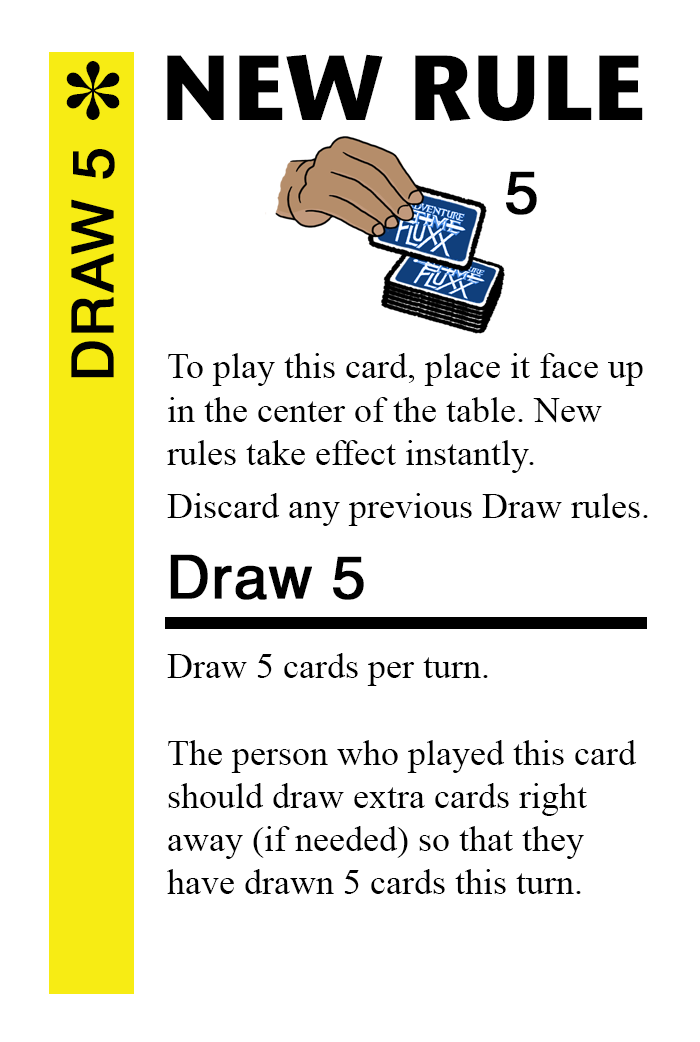
<style>
.page{position:relative;width:700px;height:1042px;background:#ffffff}
.page>*{position:absolute;margin:0}
.t1{font:92px "StoneSansITC-Bold";color:#000000}
.t2{font:82px "MS-Gothic";color:#000000}
.t3{font:58px "Helvetica";color:#000000;font-weight:bold}
.t4{font:60px "Helvetica";color:#000000;font-weight:bold}
.t5{font:36px "TimesNewRomanPSMT";color:#000000}
</style>
<div class="page">
<p class="t1" style="left:167px;top:54px;width:476px;height:67px">NEW RULE</p>
<p class="t2" style="left:66px;top:61px;width:54px;height:59px">✽</p>
<p class="t3" style="left:71px;top:149px;width:44px;height:229px;rotate:-90deg">DRAW 5</p>
<p class="t4" style="left:506px;top:171px;width:31px;height:44px">5</p>
<p class="t5" style="left:167px;top:353px;width:476px;height:120px">To play this card, place it face up<br>in the center of the table. New <br>rules take effect instantly.</p>
<p class="t5" style="left:167px;top:493px;width:481px;height:33px">Discard any previous Draw rules.</p>
<p class="t4" style="left:170px;top:554px;width:194px;height:46px">Draw 5</p>
<p class="t5" style="left:167px;top:653px;width:470px;height:241px">Draw 5 cards per turn.<br><br>The person who played this card<br>should draw extra cards right<br>away (if needed) so that they<br>have drawn 5 cards this turn.</p>
</div>
